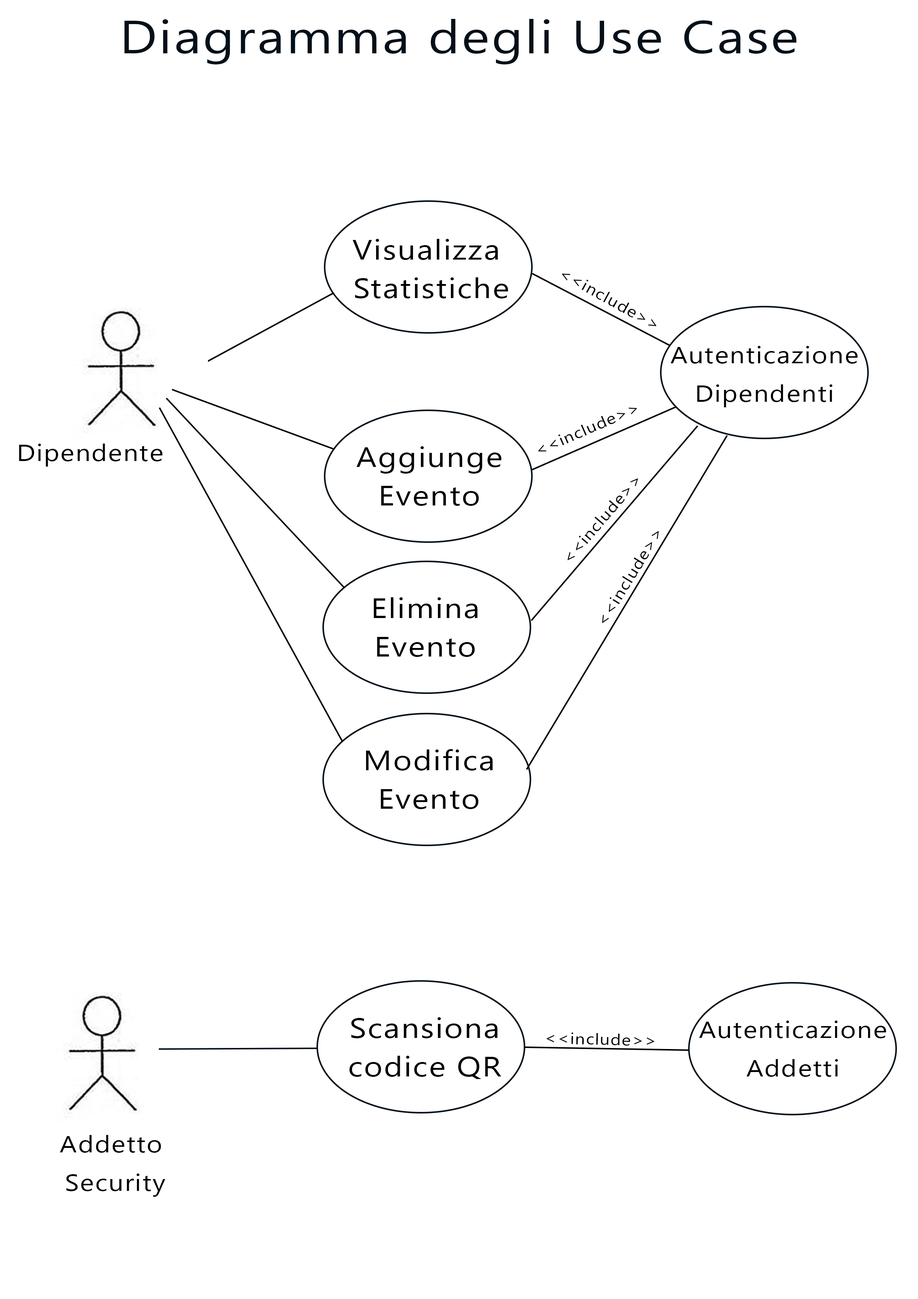
<style>
.page{position:relative;width:918px;height:1299px;background:#ffffff}
.page>*{position:absolute;margin:0}
.t1{font:46.3px "SegoeUI";letter-spacing:0.04em;color:#031019;scale:1.15 1}
.t2{font:27.8px/38.6px "SegoeUI";letter-spacing:0.04em;color:#000000;scale:1.15 1}
.t3{font:15.6px "SegoeUI";letter-spacing:0.04em;color:#000000;scale:1.14 1}
.t4{font:23.1px/38.6px "SegoeUI";letter-spacing:0.04em;color:#000000;scale:1.15 1}
.t5{font:15.4px "SegoeUI";letter-spacing:0.04em;color:#000000;scale:1.15 1}
.t6{font:23.1px "SegoeUI";letter-spacing:0.04em;color:#000000;scale:1.15 1}
</style>
<div class="page">
<p class="t1" style="left:124px;top:19px;width:673px;height:45px">Diagramma degli Use Case</p>
<p class="t2" style="left:352px;top:239px;width:156px;height:59px;text-align:center">Visualizza <br>Statistiche</p>
<p class="t3" style="left:562px;top:274px;width:95px;height:52px;rotate:29deg">&lt;&lt;include&gt;&gt;</p>
<p class="t4" style="left:670px;top:346px;width:188px;height:61px;text-align:center">Autenticazione<br>Dipendenti</p>
<p class="t5" style="left:538px;top:408px;width:99px;height:43px;rotate:-24deg">&lt;&lt;include&gt;&gt;</p>
<p class="t6" style="left:19px;top:444px;width:144px;height:22px">Dipendente</p>
<p class="t2" style="left:357px;top:446px;width:145px;height:60px;text-align:center">Aggiunge<br>Evento</p>
<p class="t5" style="left:568px;top:478px;width:70px;height:82px;rotate:-49deg">&lt;&lt;include&gt;&gt;</p>
<p class="t5" style="left:602px;top:531px;width:57px;height:92px;rotate:-58deg">&lt;&lt;include&gt;&gt;</p>
<p class="t2" style="left:374px;top:597px;width:104px;height:60px;text-align:center">Elimina<br>Evento</p>
<p class="t2" style="left:366px;top:749px;width:127px;height:60px;text-align:center">Modifica<br>Evento</p>
<p class="t2" style="left:349px;top:1017px;width:152px;height:62px;text-align:center">Scansiona<br>codice QR</p>
<p class="t4" style="left:699px;top:1020px;width:187px;height:57px;text-align:center">Autenticazione<br>Addetti</p>
<p class="t3" style="left:546px;top:1032px;width:109px;height:14px;rotate:1deg">&lt;&lt;include&gt;&gt;</p>
<p class="t4" style="left:60px;top:1135px;width:105px;height:62px;text-align:center">Addetto <br>Security</p>
</div>
